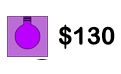
<style>
.page{position:relative;width:121px;height:74px;background:#ffffff}
.page>*{position:absolute;margin:0}
.t1{font:24px "ArialRoundedMTBold";color:#000000}
</style>
<div class="page">
<p class="t1" style="left:59px;top:24px;width:56px;height:25px">$130</p>
</div>
